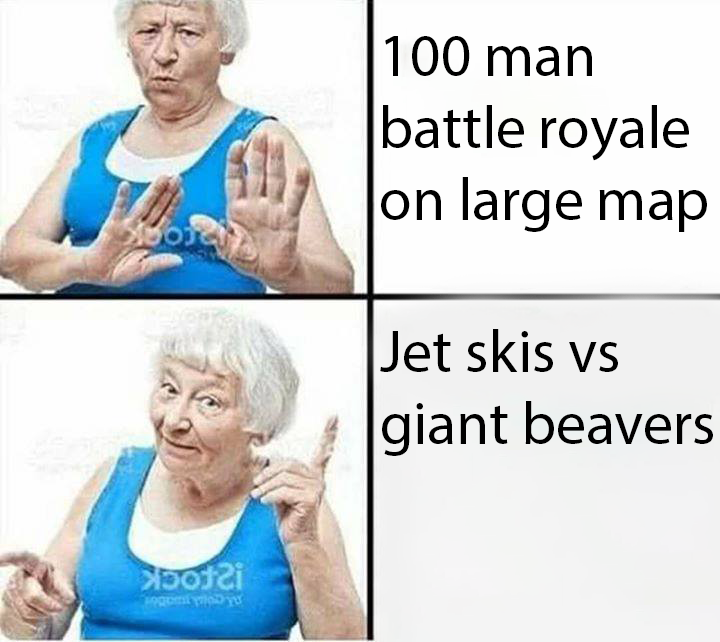
<style>
.page{position:relative;width:720px;height:642px;background:#fefefe}
.page>*{position:absolute;margin:0}
.t1{font:60px "MyriadPro-Regular";color:#000000}
.t2{font:64px "MyriadPro-Regular";color:#000000}
</style>
<div class="page">
<p class="t1" style="left:381px;top:36px;width:326px;height:196px">100 man battle royale on large map larglmap<span class="t2">maps</span></p>
<p class="t1" style="left:380px;top:329px;width:333px;height:127px">Jet skis vs giant beavers</p>
</div>
